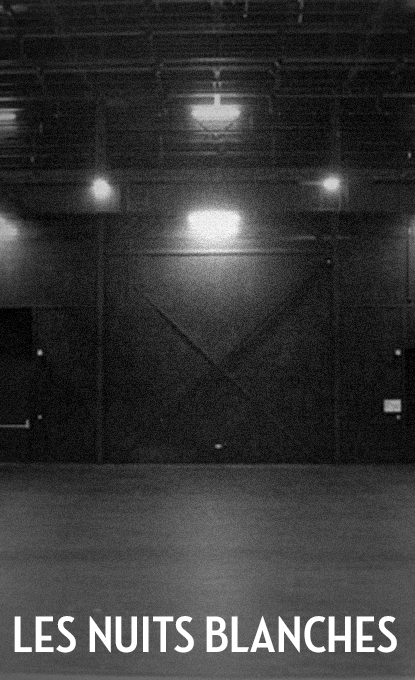
<style>
.page{position:relative;width:415px;height:680px}
.page>*{position:absolute;margin:0}
.t1{font:52.2px "NeutrafaceCondensed-Bold";color:#ffffff}
</style>
<div class="page">
<p class="t1" style="left:14px;top:616px;width:383px;height:37px">LES NUITS BLANCHES</p>
</div>
